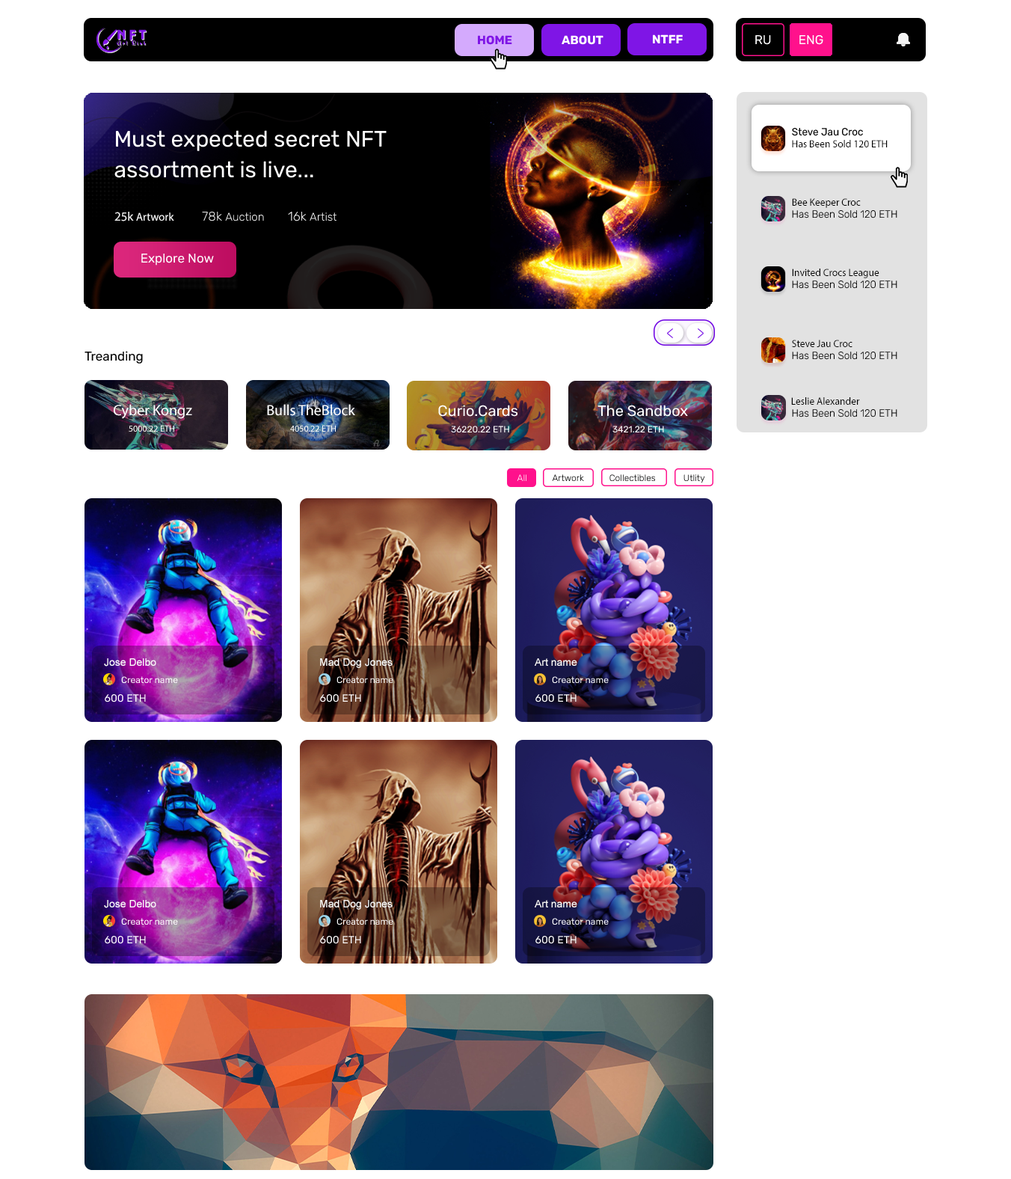
<style>
.page{position:relative;width:1011px;height:1179px;background:#ffffff}
.page>*{position:absolute;margin:0}
.t1{font:12px "Rubik-Bold";color:#7f15e6}
.t2{font:12px "Rubik-Bold";color:#ffffff}
.t3{font:12.7px "Rubik-Regular";color:#ffffff}
.t4{font:22.4px/30.7px "Rubik-Regular";color:#ffffff}
.t5{font:10.5px "Rubik-Regular";color:#000000;scale:0.97 1}
.t6{font:10.5px "MyriadPro-Regular";color:#000000;scale:0.97 1}
.t7{font:11.2px "MyriadPro-Regular";color:#ffffff}
.t8{font:12.7px "MyriadPro-Regular";color:#f0f0f0}
.t9{font:11.2px "Rubik-Light";color:#ffffff}
.t10{font:12.7px "Rubik-Light";color:#f0f0f0}
.t11{font:10.5px "Rubik-Light";color:#000000;scale:0.97 1}
.t12{font:12.7px "Rubik-Regular";color:#000000}
.t13{font:15px "MyriadPro-Regular";color:#ffffff}
.t14{font:15px "Rubik-Regular";color:#ffffff}
.t15{font:9px "MyriadPro-Regular";color:#ffffff}
.t16{font:9px "Rubik-Regular";color:#ffffff}
.t17{font:9px "Rubik-Light";color:#000000}
.t18{font:9px "Rubik-Light";color:#ffffff}
.t19{font:10.5px "ArialMT";color:#ffffff}
.t20{font:10.5px "Rubik-Regular";color:#ffffff}
</style>
<div class="page">
<p class="t1" style="left:478px;top:35px;width:34px;height:10px">HOME</p>
<p class="t2" style="left:562px;top:35px;width:42px;height:10px">ABOUT</p>
<p class="t2" style="left:653px;top:34px;width:30px;height:9px">NTFF</p>
<p class="t3" style="left:756px;top:35px;width:15px;height:10px">RU</p>
<p class="t3" style="left:800px;top:35px;width:24px;height:10px">ENG</p>
<p class="t4" style="left:114px;top:130px;width:273px;height:48px">Must expected secret NFT <br>assortment is live...</p>
<p class="t5" style="left:792px;top:128px;width:71px;height:8px">Steve Jau Croc</p>
<p class="t6" style="left:792px;top:140px;width:96px;height:7px">Has Been Sold 120 ETH</p>
<p class="t6" style="left:792px;top:198px;width:69px;height:10px">Bee Keeper Croc</p>
<p class="t7" style="left:114px;top:212px;width:60px;height:9px"><span class="t8">25k </span>Artwork</p>
<p class="t9" style="left:202px;top:212px;width:62px;height:9px"><span class="t10">78k </span>Auction</p>
<p class="t9" style="left:288px;top:212px;width:49px;height:9px"><span class="t10">16k </span>Artist</p>
<p class="t11" style="left:792px;top:210px;width:106px;height:8px">Has Been Sold 120 ETH</p>
<p class="t3" style="left:141px;top:254px;width:73px;height:12px">Explore Now</p>
<p class="t6" style="left:792px;top:269px;width:88px;height:9px">Invited Crocs League</p>
<p class="t11" style="left:792px;top:281px;width:106px;height:8px">Has Been Sold 120 ETH</p>
<p class="t6" style="left:792px;top:340px;width:61px;height:7px">Steve Jau Croc</p>
<p class="t12" style="left:85px;top:351px;width:58px;height:13px">Treanding</p>
<p class="t11" style="left:792px;top:352px;width:106px;height:8px">Has Been Sold 120 ETH</p>
<p class="t6" style="left:791px;top:397px;width:69px;height:8px">Leslie Alexander</p>
<p class="t13" style="left:114px;top:404px;width:78px;height:15px">Cyber Kongz</p>
<p class="t13" style="left:267px;top:404px;width:88px;height:12px">Bulls TheBlock</p>
<p class="t14" style="left:438px;top:405px;width:80px;height:12px">Curio.Cards</p>
<p class="t14" style="left:598px;top:405px;width:90px;height:12px">The Sandbox</p>
<p class="t11" style="left:792px;top:409px;width:106px;height:8px">Has Been Sold 120 ETH</p>
<p class="t15" style="left:129px;top:425px;width:45px;height:7px">5000.22 ETH</p>
<p class="t15" style="left:290px;top:425px;width:46px;height:7px">4050.22 ETH</p>
<p class="t16" style="left:451px;top:426px;width:58px;height:6px">36220.22 ETH</p>
<p class="t16" style="left:613px;top:426px;width:51px;height:6px">3421.22 ETH</p>
<p class="t17" style="left:517px;top:474px;width:188px;height:9px"><span class="t18">All  </span>         Artwork           Collectibles            Utlity</p>
<p class="t19" style="left:104px;top:658px;width:52px;height:9px">Jose Delbo</p>
<p class="t19" style="left:320px;top:658px;width:73px;height:10px">Mad Dog Jones</p>
<p class="t19" style="left:535px;top:658px;width:43px;height:8px">Art name</p>
<p class="t16" style="left:121px;top:676px;width:57px;height:7px">Creator name</p>
<p class="t16" style="left:337px;top:676px;width:56px;height:7px">Creator name</p>
<p class="t16" style="left:552px;top:676px;width:57px;height:7px">Creator name</p>
<p class="t20" style="left:105px;top:694px;width:41px;height:8px">600 ETH</p>
<p class="t20" style="left:320px;top:694px;width:41px;height:8px">600 ETH</p>
<p class="t20" style="left:536px;top:694px;width:41px;height:8px">600 ETH</p>
<p class="t19" style="left:104px;top:900px;width:52px;height:8px">Jose Delbo</p>
<p class="t19" style="left:320px;top:900px;width:73px;height:10px">Mad Dog Jones</p>
<p class="t19" style="left:535px;top:900px;width:43px;height:7px">Art name</p>
<p class="t16" style="left:121px;top:918px;width:57px;height:7px">Creator name</p>
<p class="t16" style="left:337px;top:918px;width:56px;height:7px">Creator name</p>
<p class="t16" style="left:552px;top:918px;width:57px;height:7px">Creator name</p>
<p class="t20" style="left:105px;top:936px;width:41px;height:8px">600 ETH</p>
<p class="t20" style="left:320px;top:936px;width:41px;height:8px">600 ETH</p>
<p class="t20" style="left:536px;top:936px;width:41px;height:8px">600 ETH</p>
</div>
